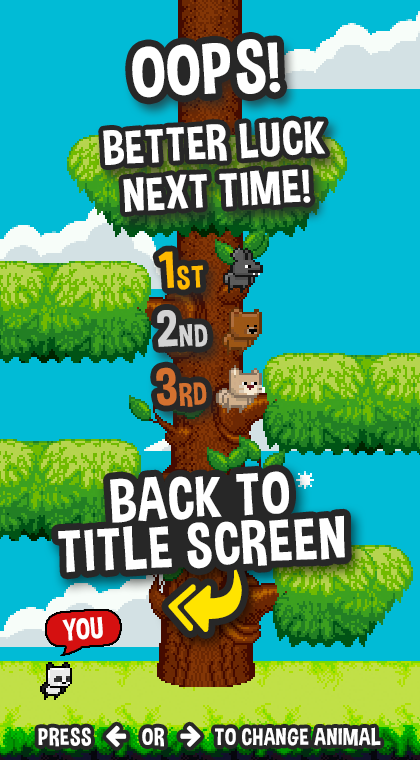
<style>
.page{position:relative;width:420px;height:760px;background:#01bbd6}
.page>*{position:absolute;margin:0}
.t1{font:72px "DimboRegular";letter-spacing:0.025em;color:#ffffff;text-transform:uppercase}
.t2{font:48px/48px "DimboRegular";letter-spacing:0.025em;color:#ffffff;text-transform:uppercase}
.t3{font:31.4px "DimboRegular";letter-spacing:0.025em;color:#ffba00;text-transform:uppercase}
.t4{font:52.3px "DimboRegular";letter-spacing:0.025em;color:#ffba00;text-transform:uppercase}
.t5{font:31.4px "DimboRegular";letter-spacing:0.025em;color:#d3d3d3;text-transform:uppercase}
.t6{font:52.3px "DimboRegular";letter-spacing:0.025em;color:#d3d3d3;text-transform:uppercase}
.t7{font:31.4px "DimboRegular";letter-spacing:0.025em;color:#d4712f;text-transform:uppercase}
.t8{font:52.3px "DimboRegular";letter-spacing:0.025em;color:#d4712f;text-transform:uppercase}
.t9{font:30px "DimboRegular";letter-spacing:0.025em;color:#ffffff;text-transform:uppercase;scale:0.97 1}
.t10{font:24px "DimboRegular";letter-spacing:0.025em;color:#ffffff;text-transform:uppercase}
</style>
<div class="page">
<p class="t1" style="left:132px;top:39px;width:149px;height:59px;rotate:-3deg">OOPS!</p>
<p class="t2" style="left:103px;top:120px;width:223px;height:92px;text-align:center;rotate:-3deg">BETTER LUCK<br>NEXT TIME!</p>
<p class="t3" style="left:158px;top:251px;width:45px;height:39px;rotate:-3deg"><span class="t4">1</span>st</p>
<p class="t5" style="left:157px;top:310px;width:51px;height:37px;rotate:-3deg"><span class="t6">2</span>nd</p>
<p class="t7" style="left:156px;top:367px;width:51px;height:40px;rotate:-3deg"><span class="t8">3</span>rd</p>
<p class="t9" style="left:62px;top:616px;width:41px;height:25px;rotate:-4deg">YOU</p>
<p class="t10" style="left:38px;top:727px;width:343px;height:20px">PRESS          OR          TO CHANGE animal</p>
</div>
